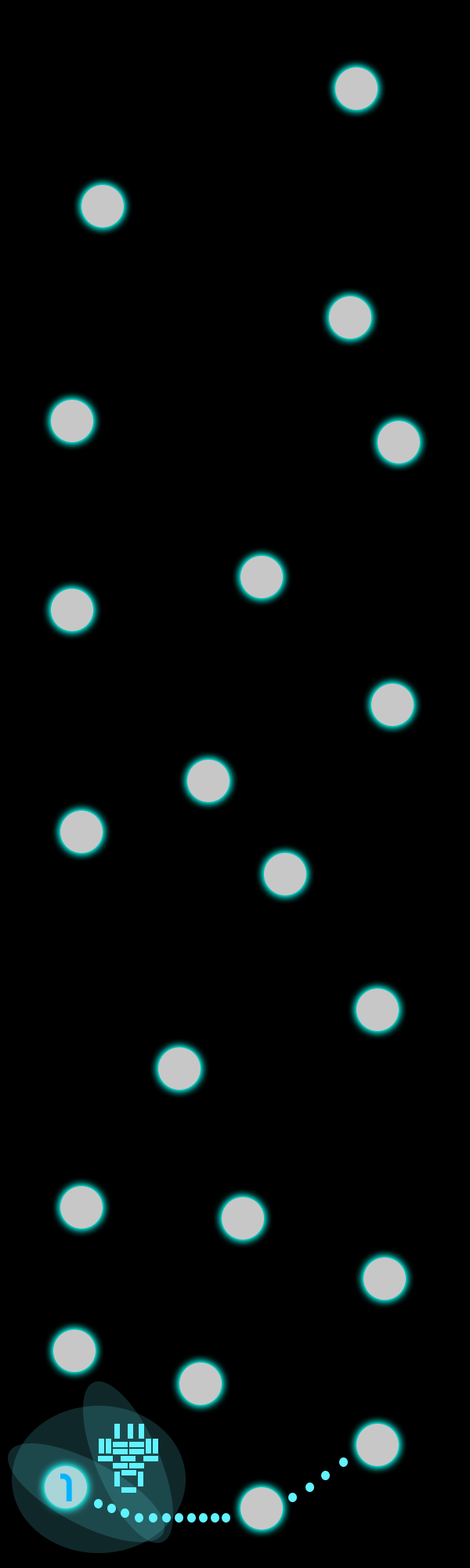
<style>
.page{position:relative;width:470px;height:1568px;background:#000000}
.page>*{position:absolute;margin:0}
.t1{font:37.6px "Racer";color:#00b4ff}
</style>
<div class="page">
<p class="t1" style="left:60px;top:1473px;width:12px;height:28px">1</p>
</div>
